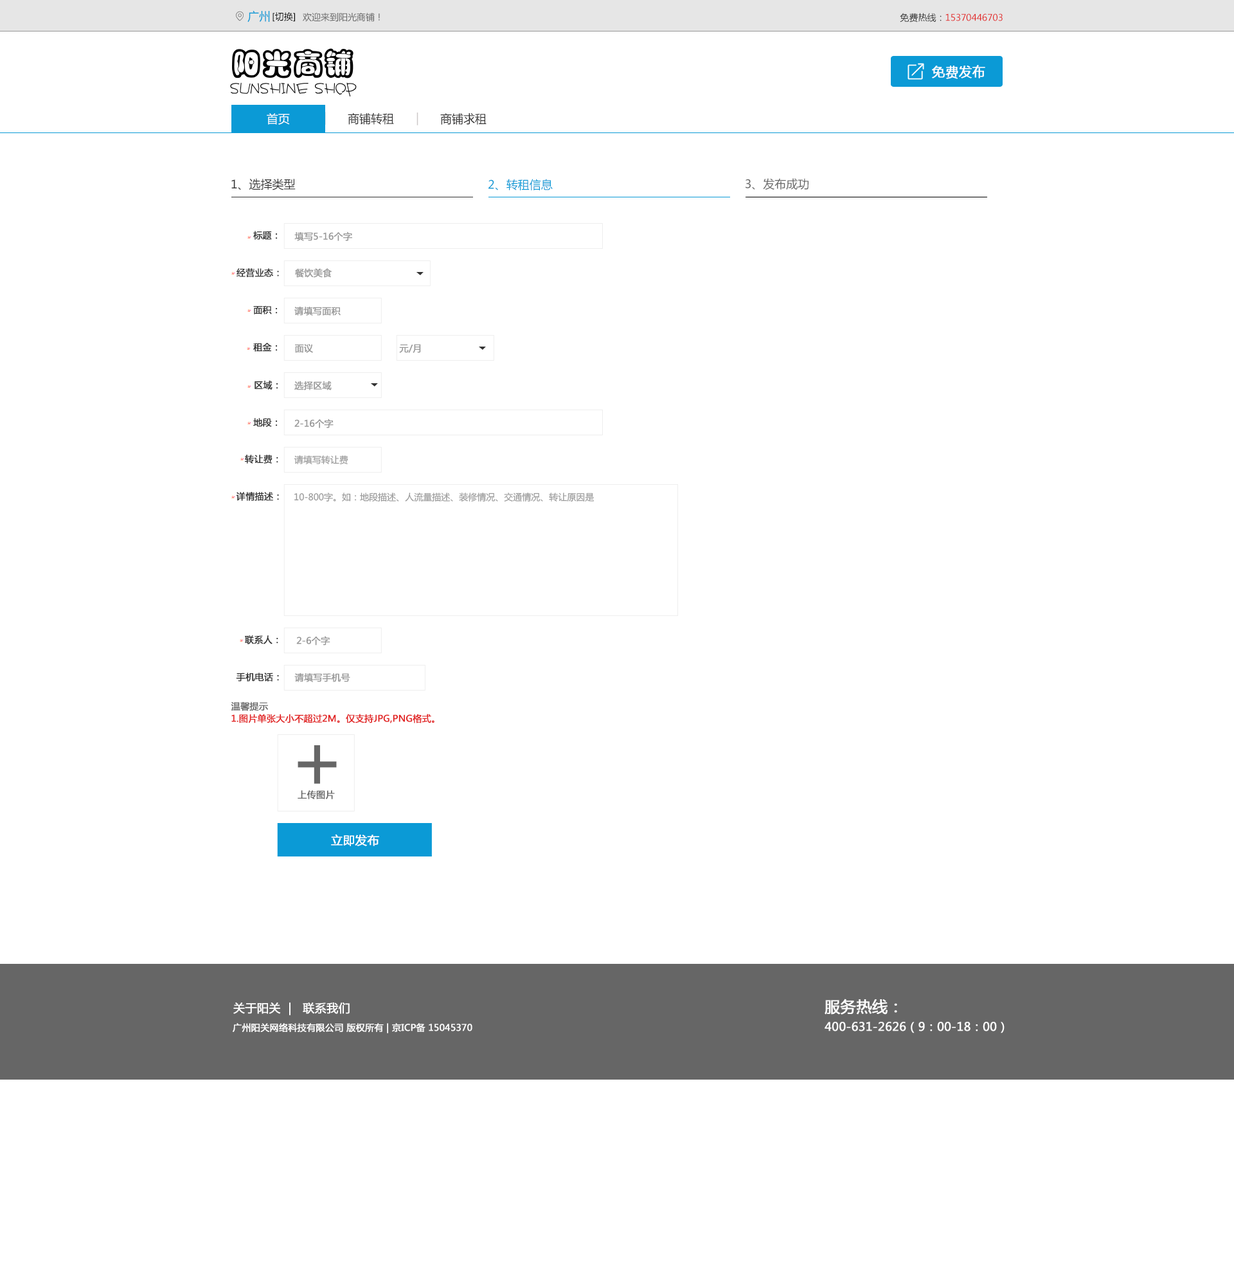
<style>
.page{position:relative;width:1234px;height:1286px;background:#ffffff}
.page>*{position:absolute;margin:0}
.t1{font:11.6px "MicrosoftYaHei";color:#0b9ad6}
.t2{font:9px "MicrosoftYaHei";color:#000000}
.t3{font:9px "MicrosoftYaHei";color:#666666}
.t4{font:9px "MicrosoftYaHei";color:#e22222}
.t5{font:9px "MicrosoftYaHei";color:#333333}
.t6{font:13.2px "MicrosoftYaHei";color:#ffffff;text-transform:uppercase;font-weight:bold}
.t7{font:11.6px "MicrosoftYaHei";color:#ffffff}
.t8{font:11.8px "MicrosoftYaHei";color:#0b9ad6}
.t9{font:11.8px "MicrosoftYaHei";color:#333232}
.t10{font:11.8px "MicrosoftYaHei";color:#ccc8c8}
.t11{font:11.6px "MicrosoftYaHei";color:#333333}
.t12{font:11.6px "MicrosoftYaHei";color:#666666}
.t13{font:9px "MicrosoftYaHei";color:#333333;text-transform:uppercase;font-weight:bold}
.t14{font:9px "MicrosoftYaHei";color:#999999;text-transform:uppercase;font-weight:bold}
.t15{font:9px "MicrosoftYaHei";color:#999999}
.t16{font:9px "MicrosoftYaHei";color:#666666;text-transform:uppercase;font-weight:bold}
.t17{font:9px "MicrosoftYaHei";color:#e22222;text-transform:uppercase;font-weight:bold}
.t18{font:76.8px "MicrosoftYaHei";color:#666666;text-transform:uppercase;font-weight:bold}
.t19{font:11.6px "MicrosoftYaHei";color:#ffffff;text-transform:uppercase;font-weight:bold}
.t20{font:15.4px "MicrosoftYaHei";color:#ffffff;text-transform:uppercase;font-weight:bold}
.t21{font:11.6px "MicrosoftYaHei";color:#fefefe;text-transform:uppercase;font-weight:bold}
.t22{font:9px "MicrosoftYaHei";color:#ffffff;text-transform:uppercase;font-weight:bold}
</style>
<div class="page">
<p class="t1" style="left:248px;top:10px;width:22px;height:13px">广州</p>
<p class="t2" style="left:273px;top:12px;width:22px;height:10px">[切换]</p>
<p class="t3" style="left:303px;top:12px;width:77px;height:10px">欢迎来到阳光商铺！</p>
<p class="t4" style="left:900px;top:13px;width:103px;height:10px"><span class="t5">免费热线：</span>15370446703</p>
<p class="t6" style="left:932px;top:65px;width:54px;height:14px">免费发布</p>
<p class="t7" style="left:267px;top:113px;width:23px;height:12px">首页</p>
<p class="t1" style="left:324px;top:112px;width:2px;height:13px">|</p>
<p class="t8" style="left:324px;top:112px;width:2px;height:13px">|</p>
<p class="t9" style="left:348px;top:113px;width:46px;height:12px">商铺转租</p>
<p class="t10" style="left:417px;top:113px;width:2px;height:12px">|</p>
<p class="t9" style="left:440px;top:113px;width:47px;height:12px">商铺求租</p>
<p class="t11" style="left:231px;top:178px;width:65px;height:12px">1、选择类型</p>
<p class="t1" style="left:489px;top:179px;width:64px;height:11px">2、转租信息</p>
<p class="t12" style="left:746px;top:178px;width:63px;height:12px">3、发布成功</p>
<p class="t13" style="left:253px;top:231px;width:25px;height:9px">标题：</p>
<p class="t14" style="left:294px;top:231px;width:58px;height:10px">填写5-16个字</p>
<p class="t13" style="left:237px;top:268px;width:42px;height:9px">经营业态：</p>
<p class="t14" style="left:295px;top:268px;width:37px;height:10px">餐饮美食</p>
<p class="t13" style="left:253px;top:305px;width:25px;height:9px">面积：</p>
<p class="t14" style="left:294px;top:306px;width:47px;height:10px">请填写面积</p>
<p class="t13" style="left:253px;top:343px;width:25px;height:9px">租金：</p>
<p class="t14" style="left:295px;top:344px;width:18px;height:9px">面议</p>
<p class="t14" style="left:399px;top:344px;width:22px;height:9px">元/月</p>
<p class="t13" style="left:255px;top:381px;width:23px;height:9px">区域：</p>
<p class="t14" style="left:294px;top:381px;width:38px;height:9px">选择区域</p>
<p class="t13" style="left:253px;top:418px;width:25px;height:9px">地段：</p>
<p class="t14" style="left:294px;top:419px;width:40px;height:9px">2-16个字</p>
<p class="t13" style="left:245px;top:455px;width:33px;height:9px">转让费：</p>
<p class="t15" style="left:294px;top:455px;width:54px;height:9px">请填写转让费</p>
<p class="t13" style="left:236px;top:492px;width:43px;height:9px">详情描述：</p>
<p class="t15" style="left:294px;top:492px;width:301px;height:9px">10-800字。如：地段描述、人流量描述、装修情况、交通情况、转让原因是</p>
<p class="t13" style="left:245px;top:635px;width:33px;height:9px">联系人：</p>
<p class="t14" style="left:296px;top:636px;width:34px;height:9px">2-6个字</p>
<p class="t13" style="left:236px;top:672px;width:43px;height:9px">手机电话：</p>
<p class="t14" style="left:294px;top:672px;width:56px;height:10px">请填写手机号</p>
<p class="t16" style="left:231px;top:701px;width:37px;height:10px">温馨提示</p>
<p class="t17" style="left:231px;top:714px;width:204px;height:9px">1.图片单张大小不超过2M。仅支持jpg,png格式。</p>
<p class="t18" style="left:298px;top:745px;width:39px;height:39px">+</p>
<p class="t16" style="left:298px;top:790px;width:37px;height:9px">上传图片</p>
<p class="t19" style="left:331px;top:834px;width:48px;height:12px">立即发布</p>
<p class="t20" style="left:825px;top:998px;width:72px;height:16px">服务热线：</p>
<p class="t21" style="left:233px;top:1002px;width:117px;height:13px">关于阳关  |   联系我们</p>
<p class="t22" style="left:233px;top:1023px;width:240px;height:10px">广州阳关网络科技有限公司 版权所有 | 京ICP备 15045370</p>
<p class="t19" style="left:825px;top:1022px;width:180px;height:11px">400-631-2626（9：00-18：00）</p>
</div>
